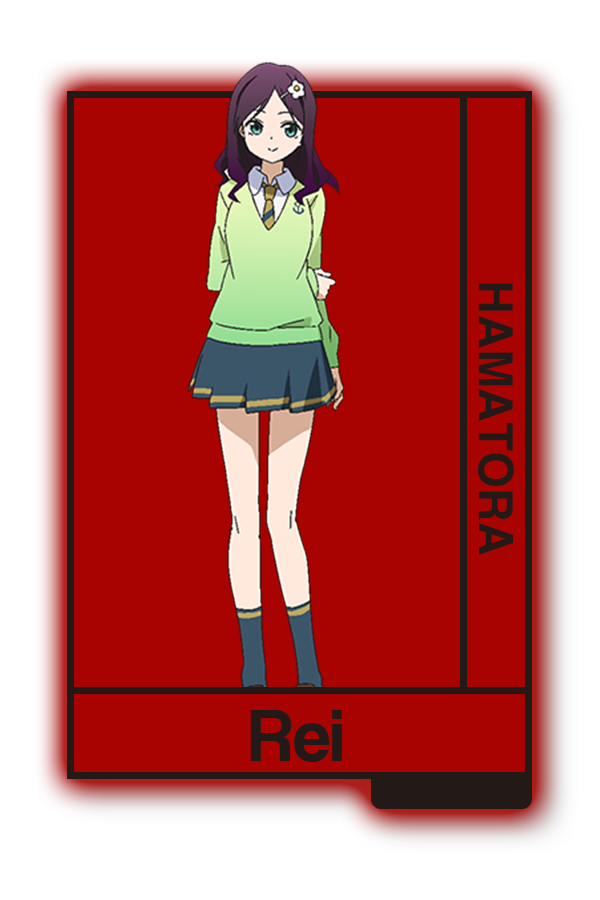
<style>
.page{position:relative;width:600px;height:900px;background:#a80301}
.page>*{position:absolute;margin:0}
.t1{font:47.4px "Helvetica-Bold";color:#231917}
.t2{font:75px "CoolveticaRg-Regular";color:#231917}
</style>
<div class="page">
<p class="t1" style="left:478px;top:283px;width:36px;height:272px;rotate:90deg">HAMATORA</p>
<p class="t2" style="left:250px;top:710px;width:92px;height:52px">Rei</p>
</div>
